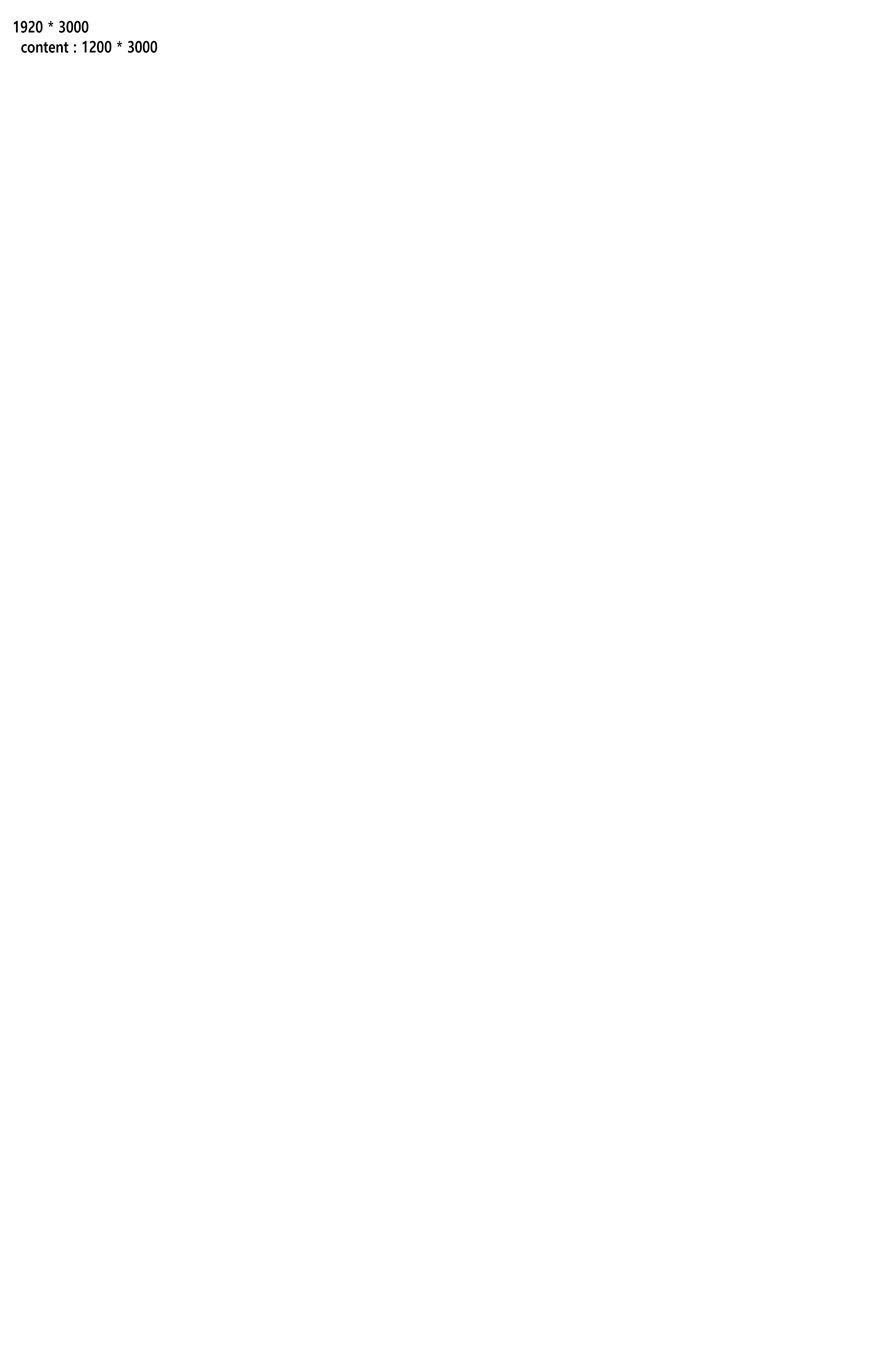
<style>
.page{position:relative;width:874px;height:1365px;background:#ffffff}
.page>*{position:absolute;margin:0}
.t1{font:15.9px "MalgunGothicBold";color:#000000;scale:0.83 1}
</style>
<div class="page">
<p class="t1" style="left:14px;top:20px;width:75px;height:13px">1920 * 3000</p>
<p class="t1" style="left:21px;top:40px;width:136px;height:13px">content : 1200 * 3000</p>
</div>
